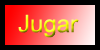
<style>
.page{position:relative;width:100px;height:50px;background:#000000}
.page>*{position:absolute;margin:0}
.t1{font:24px "ArialMT"}
</style>
<div class="page">
<p class="t1" style="left:18px;top:14px;width:61px;height:24px">Jugar</p>
</div>
